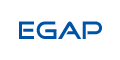
<style>
.page{position:relative;width:120px;height:60px;background:#ffffff}
.page>*{position:absolute;margin:0}
.t1{font:24px "GoodTimes";color:#0052a5}
</style>
<div class="page">
<p class="t1" style="left:19px;top:21px;width:83px;height:18px">EgAp</p>
</div>
